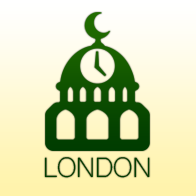
<style>
.page{position:relative;width:196px;height:196px}
.page>*{position:absolute;margin:0}
.t1{font:26.2px "ShreeDev0714";color:#013e00}
</style>
<div class="page">
<p class="t1" style="left:44px;top:157px;width:106px;height:21px">LONDON</p>
</div>
